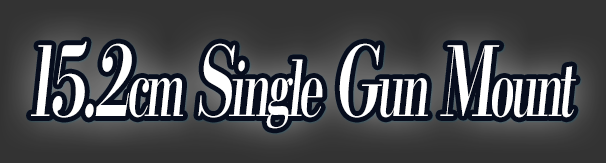
<style>
.page{position:relative;width:606px;height:163px}
.page>*{position:absolute;margin:0}
.t1{font:76.8px "KochoStd-Heavy";letter-spacing:-0.08em;color:#ffffff;font-style:italic;scale:0.59 1}
.t2{font:96px "KochoStd-Heavy";letter-spacing:-0.08em;color:#ffffff;font-style:italic;scale:0.59 1}
</style>
<div class="page">
<p class="t1" style="left:31px;top:41px;width:545px;height:88px"><span class="t2">15.2</span>cm<span class="t2"> S</span>ingle<span class="t2"> G</span>un<span class="t2"> M</span>ount</p>
</div>
